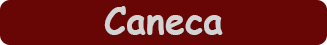
<style>
.page{position:relative;width:327px;height:45px;background:#680505}
.page>*{position:absolute;margin:0}
.t1{font:36px "ComicSansMS-Bold";color:#d3d3d3}
</style>
<div class="page">
<p class="t1" style="left:104px;top:6px;width:119px;height:29px">Caneca</p>
</div>
